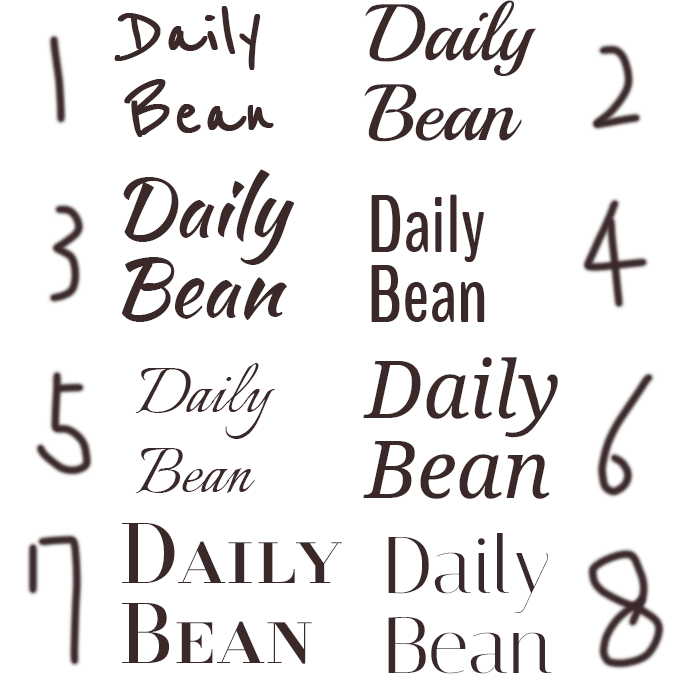
<style>
.page{position:relative;width:700px;height:700px;background:#ffffff}
.page>*{position:absolute;margin:0}
.t1{font:80px/80px "ReenieBeanie";color:#3b292a;font-weight:bold}
.t2{font:80px/80px "Playball-Regular";color:#3b292a}
.t3{font:80px/80px "KaushanScript-Regular";color:#3b292a}
.t4{font:80px/70px "BenchNine-Bold";color:#3b292a}
.t5{font:80px/80px "Italianno-Regular";color:#3b292a}
.t6{font:80px/80px "NotoSerif-Italic";color:#3b292a}
.t7{font:80px/80px "BodoniModaSC18pt-Medium";color:#3b292a}
.t8{font:80px/80px "Italiana-Regular";color:#3b292a}
</style>
<div class="page">
<p class="t1" style="left:114px;top:6px;width:160px;height:131px">Daily<br>Bean</p>
<p class="t2" style="left:364px;top:0px;width:173px;height:142px">Daily<br>Bean</p>
<p class="t3" style="left:121px;top:169px;width:174px;height:153px">Daily<br>Bean</p>
<p class="t4" style="left:371px;top:194px;width:114px;height:128px">Daily<br>Bean</p>
<p class="t5" style="left:135px;top:363px;width:140px;height:130px">Daily<br>Bean</p>
<p class="t6" style="left:363px;top:357px;width:195px;height:142px">Daily<br>Bean</p>
<p class="t7" style="left:122px;top:523px;width:220px;height:141px">Daily<br>Bean</p>
<p class="t8" style="left:388px;top:533px;width:164px;height:141px">Daily<br>Bean</p>
</div>
